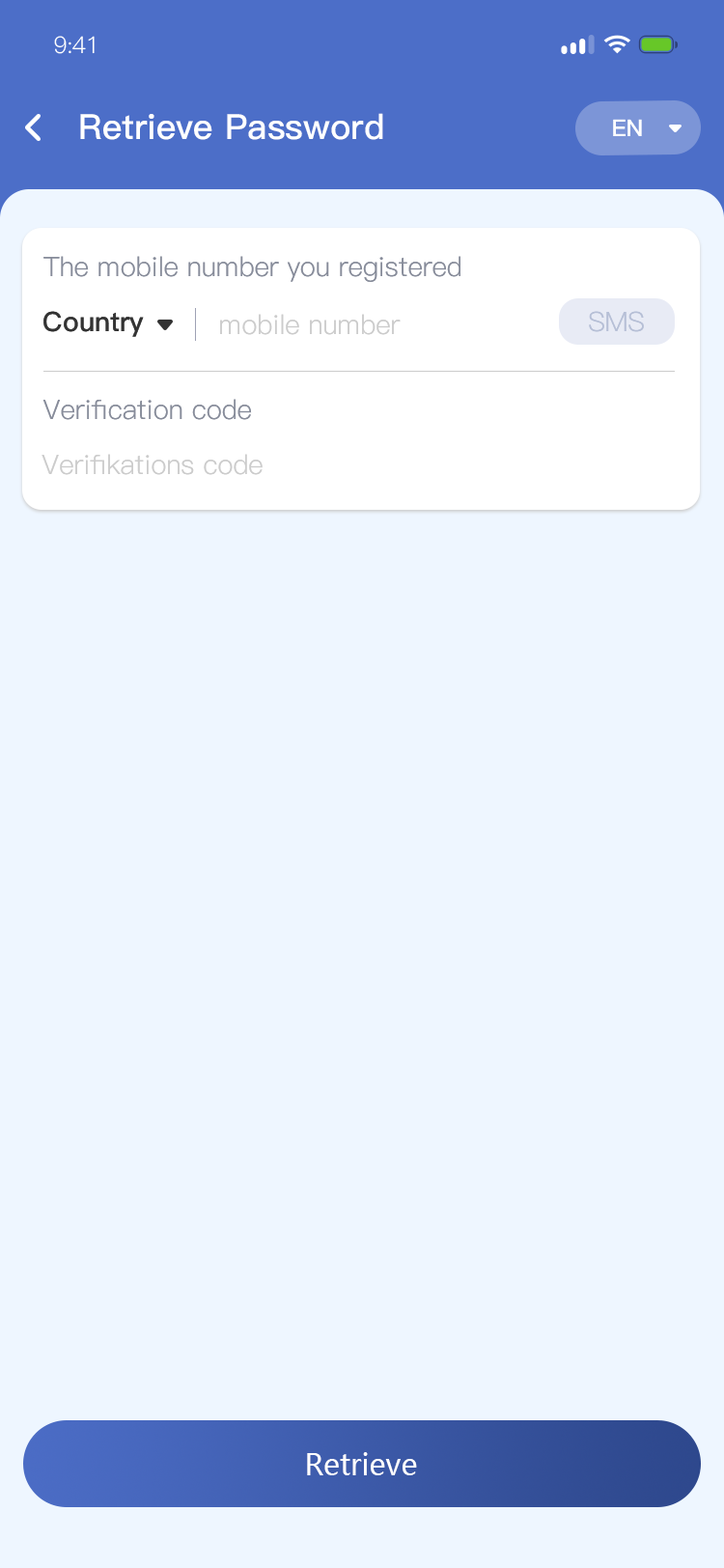
<style>
.page{position:relative;width:724px;height:1568px;background:#eef6ff}
.page>*{position:absolute;margin:0}
.t1{font:23.2px "PingFang-SC-Regular";letter-spacing:-0.025em;color:#ffffff}
.t2{font:34.8px "PingFang-SC-Bold";color:#feffff}
.t3{font:34.8px "PingFang-SC-Bold";color:#feffff;text-transform:uppercase}
.t4{font:23.2px "PingFang-SC-Bold";color:#ffffff}
.t5{font:27px "PingFang-SC-Regular";color:#878c9a}
.t6{font:27px "PingFang-SC-Regular";color:#878c9a;text-transform:uppercase}
.t7{font:27px "PingFang-SC-Bold";color:#333333}
.t8{font:27px "PingFang-SC-Bold";color:#333333;text-transform:uppercase}
.t9{font:27px "PingFang-SC-Regular";color:#cccccc}
.t10{font:27px "PingFang-SC-Regular";color:#b6bfd6;text-transform:uppercase}
.t11{font:29px "MicrosoftYaHei";color:#ffffff}
</style>
<div class="page">
<p class="t1" style="left:54px;top:36px;width:41px;height:18px">9:41</p>
<p class="t2" style="left:80px;top:113px;width:303px;height:27px"><span class="t3">R</span>etrieve Password</p>
<p class="t4" style="left:613px;top:119px;width:29px;height:17px">EN</p>
<p class="t5" style="left:43px;top:256px;width:418px;height:26px"><span class="t6">t</span>he mobile number you registered</p>
<p class="t7" style="left:43px;top:311px;width:101px;height:26px"><span class="t8">C</span>ountry</p>
<p class="t9" style="left:220px;top:314px;width:181px;height:21px">mobile number</p>
<p class="t10" style="left:589px;top:311px;width:55px;height:21px">SMS</p>
<p class="t5" style="left:42px;top:399px;width:210px;height:21px"><span class="t6">v</span>erification code</p>
<p class="t9" style="left:42px;top:454px;width:221px;height:21px">Verifikations code</p>
<p class="t11" style="left:307px;top:1452px;width:110px;height:23px">Retrieve</p>
</div>
